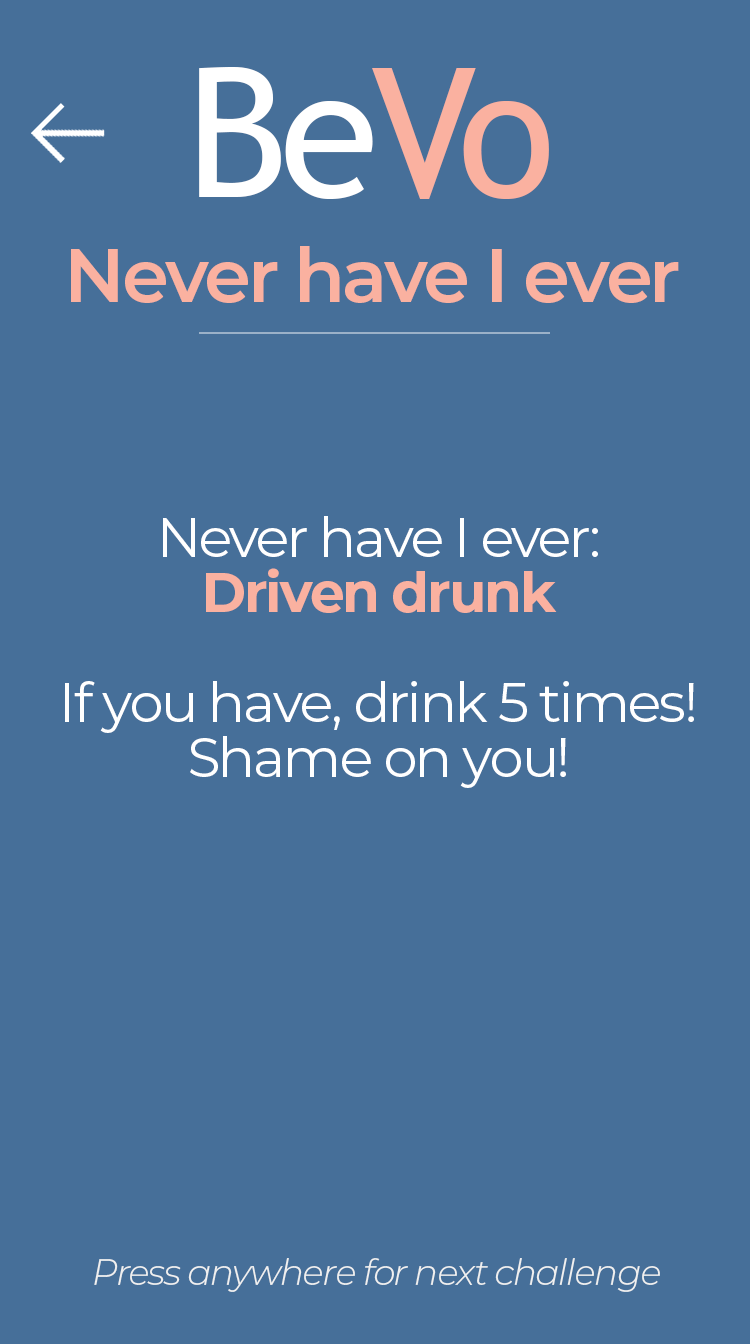
<style>
.page{position:relative;width:750px;height:1344px;background:#466f99}
.page>*{position:absolute;margin:0}
.t1{font:180px "TrebuchetMS";letter-spacing:-0.04em;color:#ffffff}
.t2{font:180px "TrebuchetMS";letter-spacing:-0.04em;color:#fab1a0}
.t3{font:75px "Montserrat-SemiBold";letter-spacing:-0.04em;color:#fab1a0}
.t4{font:55px/55px "Montserrat-Regular";letter-spacing:-0.04em;color:#ffffff}
.t5{font:55px/55px "Montserrat-Bold";letter-spacing:-0.04em;color:#fab1a0}
.t6{font:36px "Montserrat-LightItalic";letter-spacing:-0.04em;color:#f0f0f0}
</style>
<div class="page">
<p class="t1" style="left:199px;top:67px;width:350px;height:132px">Be<span class="t2">Vo</span></p>
<p class="t3" style="left:71px;top:246px;width:608px;height:57px">Never have I ever</p>
<p class="t4" style="left:65px;top:516px;width:629px;height:272px;text-align:center">Never have I ever:<br><span class="t5">Driven drunk<br></span><br>If you have, drink 5 times!<br>Shame on you!</p>
<p class="t6" style="left:94px;top:1258px;width:566px;height:34px">Press anywhere for next challenge</p>
</div>
